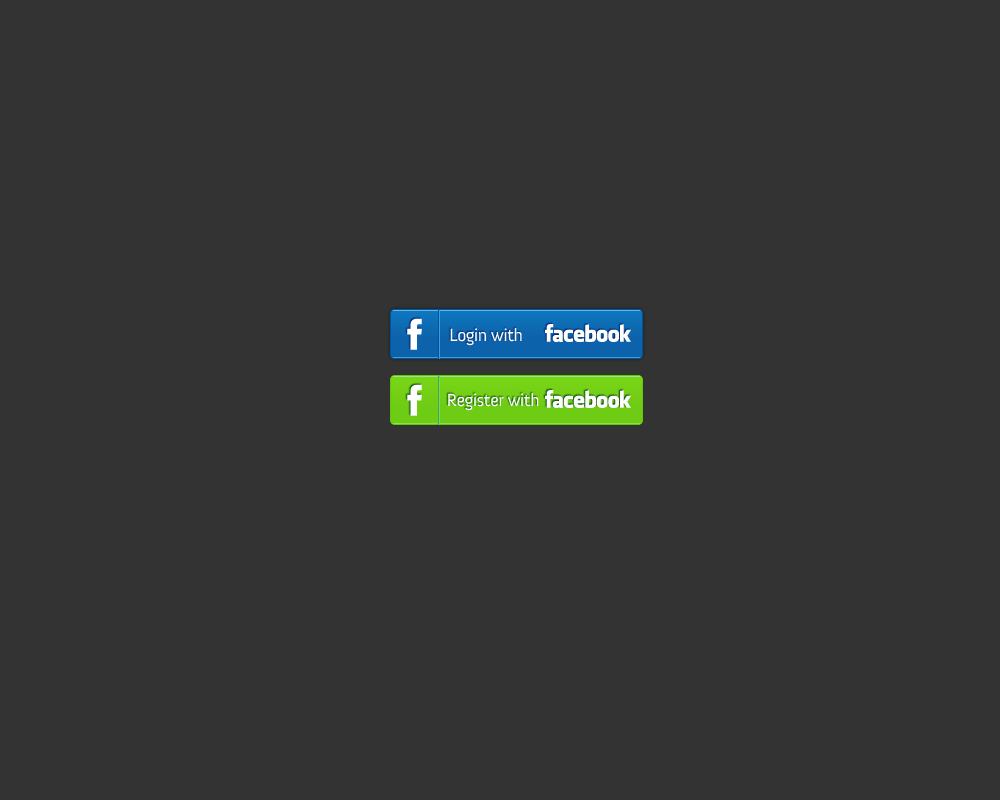
<style>
.page{position:relative;width:1000px;height:800px;background:#333333}
.page>*{position:absolute;margin:0}
.t1{font:18px "Anivers-Regular";letter-spacing:-0.025em;color:#ffffff}
</style>
<div class="page">
<p class="t1" style="left:450px;top:328px;width:72px;height:18px">Login with</p>
<p class="t1" style="left:448px;top:393px;width:91px;height:18px">Register with</p>
</div>
